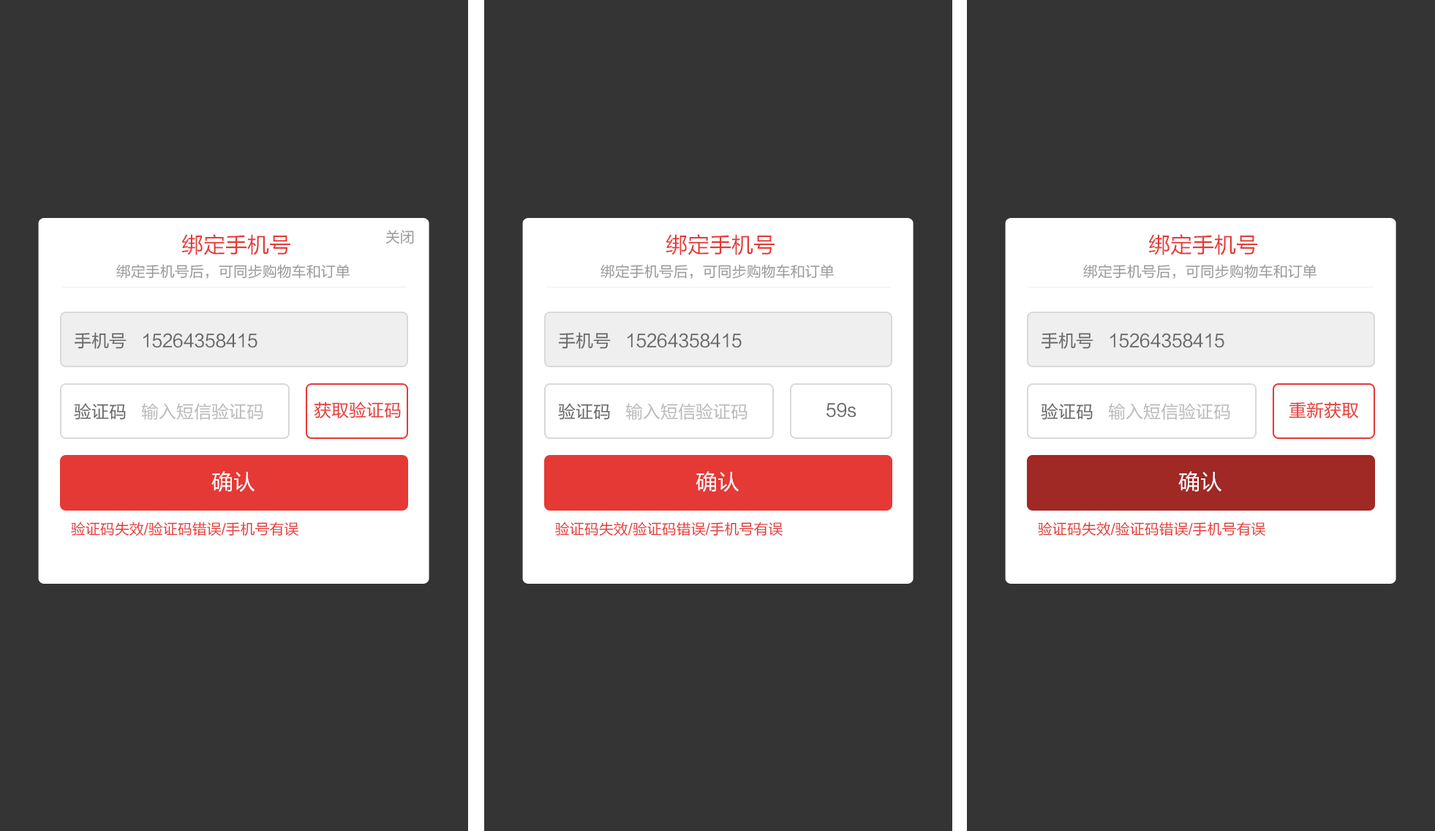
<style>
.page{position:relative;width:1435px;height:831px;background:#343434}
.page>*{position:absolute;margin:0}
.t1{font:14.6px "FZLTHK--GBK1-0";color:#999999}
.t2{font:21.9px "FZLTHK--GBK1-0";color:#e53935}
.t3{font:17.6px "FZLTHK--GBK1-0";color:#666666}
.t4{font:17.6px "FZLTHK--GBK1-0";color:#e53935}
.t5{font:17.6px "FZLTHK--GBK1-0";color:#bbbbbb}
.t6{font:21.9px "FZLTHK--GBK1-0";color:#ffffff}
.t7{font:14.6px "FZLTHK--GBK1-0";color:#e53935}
</style>
<div class="page">
<p class="t1" style="left:385px;top:230px;width:29px;height:14px">关闭</p>
<p class="t2" style="left:181px;top:234px;width:109px;height:21px">绑定手机号</p>
<p class="t2" style="left:666px;top:234px;width:109px;height:21px">绑定手机号</p>
<p class="t2" style="left:1148px;top:234px;width:109px;height:21px">绑定手机号</p>
<p class="t1" style="left:116px;top:264px;width:234px;height:15px">绑定手机号后，可同步购物车和订单</p>
<p class="t1" style="left:601px;top:264px;width:233px;height:15px">绑定手机号后，可同步购物车和订单</p>
<p class="t1" style="left:1083px;top:264px;width:234px;height:15px">绑定手机号后，可同步购物车和订单</p>
<p class="t3" style="left:74px;top:332px;width:183px;height:17px">手机号   15264358415</p>
<p class="t3" style="left:558px;top:332px;width:184px;height:17px">手机号   15264358415</p>
<p class="t3" style="left:1041px;top:332px;width:183px;height:17px">手机号   15264358415</p>
<p class="t4" style="left:314px;top:402px;width:87px;height:16px">获取验证码</p>
<p class="t4" style="left:1289px;top:402px;width:70px;height:16px">重新获取</p>
<p class="t5" style="left:74px;top:403px;width:189px;height:17px"><span class="t3">验证码   </span>输入短信验证码</p>
<p class="t5" style="left:558px;top:403px;width:190px;height:17px"><span class="t3">验证码   </span>输入短信验证码</p>
<p class="t3" style="left:827px;top:402px;width:30px;height:16px">59s</p>
<p class="t5" style="left:1041px;top:403px;width:189px;height:17px"><span class="t3">验证码   </span>输入短信验证码</p>
<p class="t6" style="left:211px;top:471px;width:44px;height:21px">确认</p>
<p class="t6" style="left:696px;top:471px;width:43px;height:21px">确认</p>
<p class="t6" style="left:1178px;top:471px;width:44px;height:21px">确认</p>
<p class="t7" style="left:71px;top:522px;width:227px;height:14px">验证码失效/验证码错误/手机号有误</p>
<p class="t7" style="left:555px;top:522px;width:228px;height:14px">验证码失效/验证码错误/手机号有误</p>
<p class="t7" style="left:1038px;top:522px;width:227px;height:14px">验证码失效/验证码错误/手机号有误</p>
</div>
